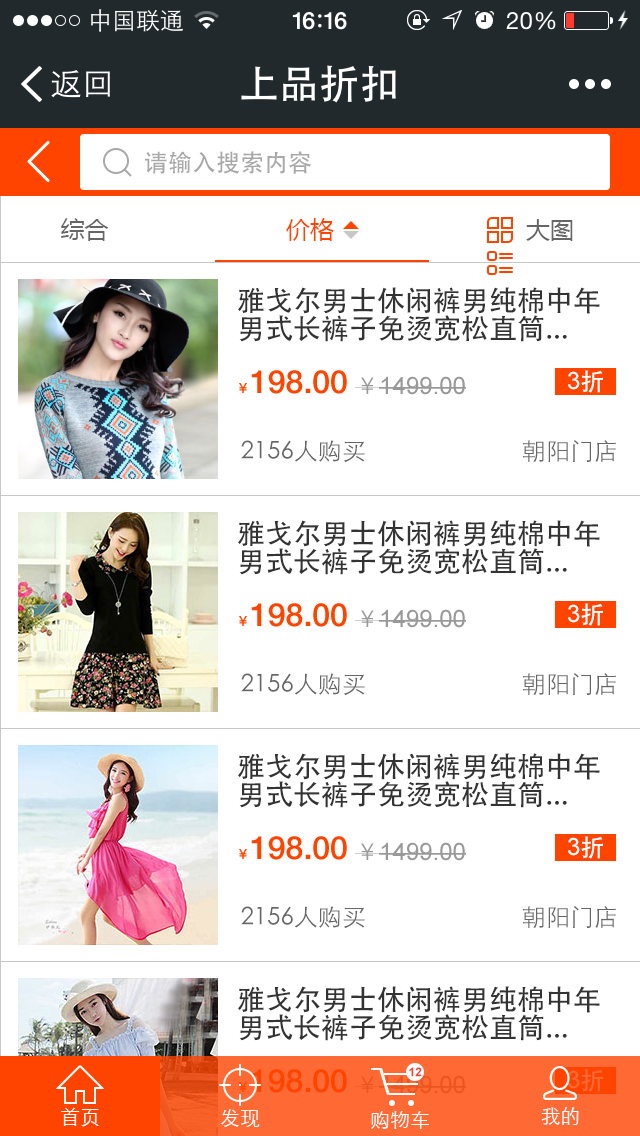
<style>
.page{position:relative;width:640px;height:1136px;background:#ffffff}
.page>*{position:absolute;margin:0}
.t1{font:24px "STHeiti";color:#a8a8a8}
.t2{font:24px "MicrosoftYaHei";color:#666666}
.t3{font:24px "MicrosoftYaHei";color:#ff4400}
.t4{font:28px/28px "STHeiti";color:#333333}
.t5{font:32px "HelveticaNeue-Medium";color:#ff4400}
.t6{font:14px "STHeiti";color:#ff4400}
.t7{font:24px "ArialMT";color:#999999}
.t8{font:24px "STXihei";color:#999999}
.t9{font:24px "ArialMT";color:#ffffff}
.t10{font:24px "STHeiti";color:#ffffff}
.t11{font:24px "STXihei";color:#666666}
.t12{font:12px "Arial-BoldMT";color:#ff3b30}
.t13{font:24px "ArialMT";color:#ff6933}
.t14{font:24px "STHeiti";color:#ff6933}
.t15{font:24px "ArialMT";color:#eb551f}
.t16{font:24px "STXihei";color:#eb551f}
.t17{font:20px "STXihei";color:#ffffff}
</style>
<div class="page">
<p class="t1" style="left:145px;top:151px;width:166px;height:23px">请输入搜索内容</p>
<p class="t2" style="left:61px;top:218px;width:512px;height:23px">综合                         <span class="t3">价格</span>                           大图</p>
<p class="t4" style="left:238px;top:287px;width:362px;height:55px">雅戈尔男士休闲裤男纯棉中年<br>男式长裤子免烫宽松直筒...</p>
<p class="t5" style="left:239px;top:370px;width:108px;height:24px"><span class="t6">￥</span>198.00</p>
<p class="t7" style="left:355px;top:376px;width:111px;height:19px"><span class="t8">￥</span>1499.00</p>
<p class="t9" style="left:568px;top:370px;width:35px;height:23px">3<span class="t10">折</span></p>
<p class="t11" style="left:241px;top:440px;width:375px;height:23px">2156人购买                          朝阳门店</p>
<p class="t4" style="left:238px;top:520px;width:362px;height:55px">雅戈尔男士休闲裤男纯棉中年<br>男式长裤子免烫宽松直筒...</p>
<p class="t5" style="left:239px;top:603px;width:108px;height:24px"><span class="t6">￥</span>198.00</p>
<p class="t9" style="left:568px;top:603px;width:35px;height:23px">3<span class="t10">折</span></p>
<p class="t7" style="left:355px;top:609px;width:111px;height:19px"><span class="t8">￥</span>1499.00</p>
<p class="t11" style="left:241px;top:673px;width:375px;height:23px">2156人购买                          朝阳门店</p>
<p class="t4" style="left:238px;top:753px;width:362px;height:55px">雅戈尔男士休闲裤男纯棉中年<br>男式长裤子免烫宽松直筒...</p>
<p class="t5" style="left:239px;top:836px;width:108px;height:24px"><span class="t6">￥</span>198.00</p>
<p class="t7" style="left:355px;top:842px;width:111px;height:19px"><span class="t8">￥</span>1499.00</p>
<p class="t9" style="left:568px;top:836px;width:35px;height:23px">3<span class="t10">折</span></p>
<p class="t11" style="left:241px;top:906px;width:375px;height:23px">2156人购买                          朝阳门店</p>
<p class="t4" style="left:238px;top:986px;width:362px;height:55px">雅戈尔男士休闲裤男纯棉中年<br>男式长裤子免烫宽松直筒...</p>
<p class="t5" style="left:239px;top:1069px;width:108px;height:24px"><span class="t6">￥</span>198.00</p>
<p class="t12" style="left:409px;top:1067px;width:13px;height:10px">12</p>
<p class="t13" style="left:568px;top:1069px;width:35px;height:23px">3<span class="t14">折</span></p>
<p class="t15" style="left:355px;top:1075px;width:111px;height:19px"><span class="t16">￥</span>1499.00</p>
<p class="t17" style="left:61px;top:1107px;width:38px;height:20px">首页</p>
<p class="t17" style="left:220px;top:1109px;width:40px;height:18px">发现</p>
<p class="t17" style="left:371px;top:1110px;width:58px;height:19px">购物车</p>
<p class="t17" style="left:541px;top:1107px;width:38px;height:18px">我的</p>
</div>
